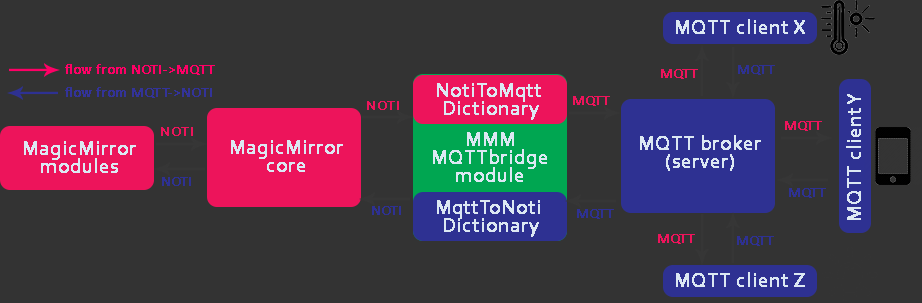
<style>
.page{position:relative;width:922px;height:303px;background:#333333}
.page>*{position:absolute;margin:0}
.t1{font:20px "Corbel";color:#dce8f3;font-weight:bold}
.t2{font:14px "Calibri";color:#ff0066;font-weight:bold}
.t3{font:14px "Calibri";color:#2e3192;font-weight:bold}
.t4{font:14px "Calibri";color:#ed145b;font-weight:bold}
.t5{font:14px "Calibri";color:#333399;font-weight:bold}
.t6{font:20px/18px "Corbel";color:#dce8f3;font-weight:bold}
.t7{font:14px "Corbel";color:#ed145b;font-weight:bold}
</style>
<div class="page">
<p class="t1" style="left:676px;top:19px;width:129px;height:15px">MQTT client X</p>
<p class="t2" style="left:65px;top:64px;width:150px;height:11px">flow from NOTI-&gt;MQTT</p>
<p class="t3" style="left:738px;top:65px;width:37px;height:10px">MQTT</p>
<p class="t4" style="left:661px;top:69px;width:37px;height:10px">MQTT</p>
<p class="t5" style="left:65px;top:87px;width:147px;height:11px">flow from MQTT-&gt;NOTI</p>
<p class="t6" style="left:437px;top:83px;width:104px;height:37px;text-align:center">NotiToMqtt <br>Dictionary</p>
<p class="t7" style="left:367px;top:101px;width:32px;height:9px">NOTI</p>
<p class="t4" style="left:573px;top:96px;width:37px;height:10px">MQTT</p>
<p class="t1" style="left:846px;top:94px;width:15px;height:126px;rotate:-90deg">MQTT client Y</p>
<p class="t4" style="left:785px;top:121px;width:37px;height:10px">MQTT</p>
<p class="t7" style="left:161px;top:127px;width:32px;height:9px">NOTI</p>
<p class="t6" style="left:433px;top:132px;width:114px;height:50px;text-align:center">MMM<br>MQTTbridge<br>module</p>
<p class="t6" style="left:640px;top:135px;width:121px;height:36px;text-align:center">MQTT broker<br>(server)</p>
<p class="t6" style="left:24px;top:141px;width:112px;height:32px;text-align:center">MagicMirror<br>modules</p>
<p class="t6" style="left:231px;top:140px;width:112px;height:32px;text-align:center">MagicMirror<br>core</p>
<p class="t3" style="left:162px;top:177px;width:29px;height:9px">NOTI</p>
<p class="t3" style="left:789px;top:188px;width:37px;height:10px">MQTT</p>
<p class="t3" style="left:372px;top:206px;width:29px;height:9px">NOTI</p>
<p class="t6" style="left:437px;top:200px;width:103px;height:37px;text-align:center">MqttToNoti <br>Dictionary</p>
<p class="t3" style="left:577px;top:209px;width:37px;height:10px">MQTT</p>
<p class="t4" style="left:658px;top:234px;width:37px;height:10px">MQTT</p>
<p class="t3" style="left:737px;top:236px;width:37px;height:10px">MQTT</p>
<p class="t1" style="left:676px;top:272px;width:129px;height:15px">MQTT client Z</p>
</div>
